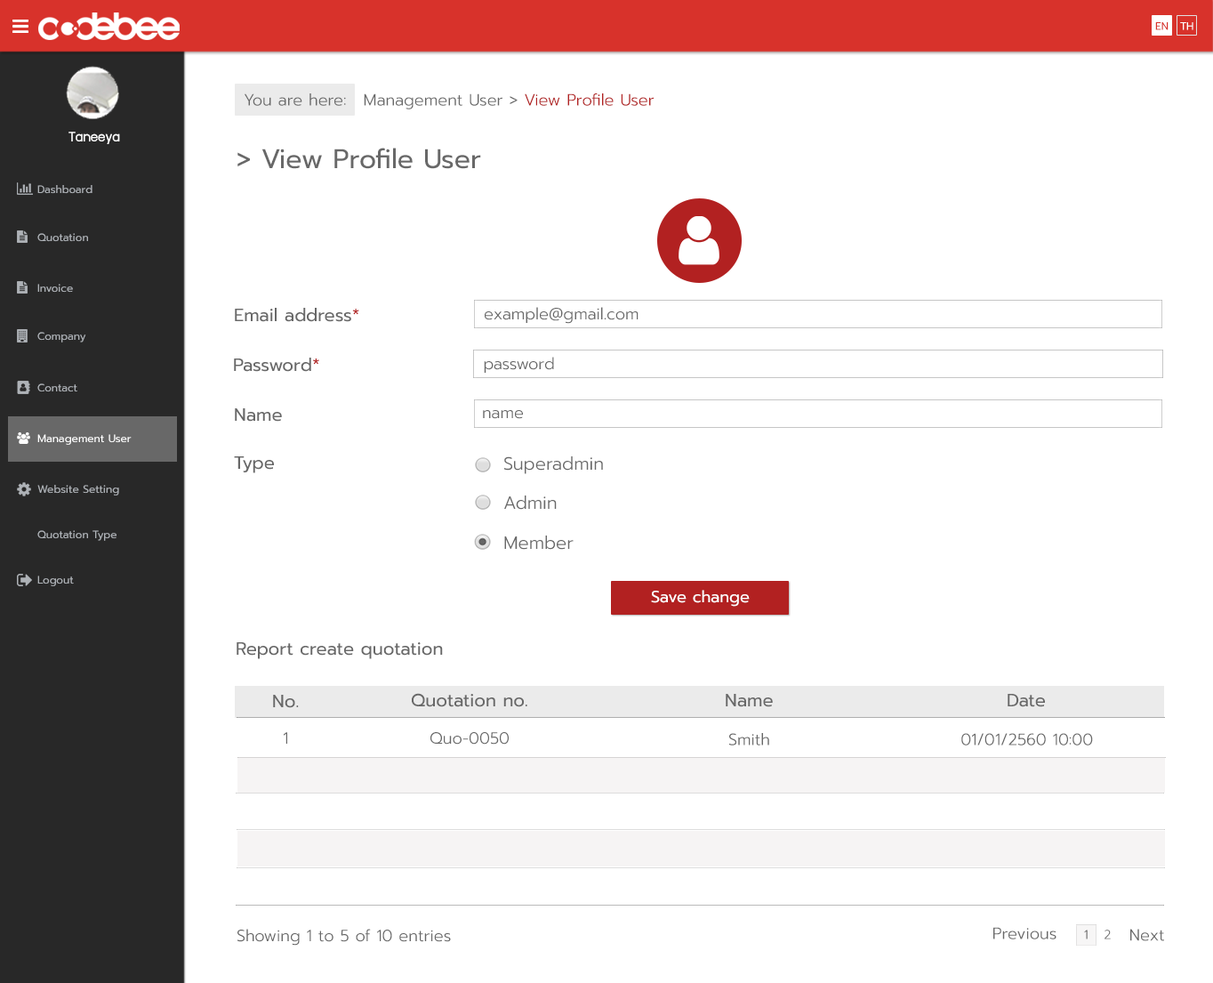
<style>
.page{position:relative;width:1213px;height:983px;background:#ffffff}
.page>*{position:absolute;margin:0}
.t1{font:10.7px "Prompt-Regular";color:#d8322b}
.t2{font:10.7px "Prompt-Regular";color:#ffffff}
.t3{font:16px "Prompt-Light";color:#686868}
.t4{font:16px "Prompt-Light";color:#b22121}
.t5{font:16px "supermarket";color:#ffffff}
.t6{font:26.7px "Prompt-Regular";color:#686868}
.t7{font:10.7px "Prompt-Regular";color:#aeb2b7}
.t8{font:17.8px "Prompt-Regular";color:#686868}
.t9{font:17.8px "Prompt-Regular";color:#b22121}
.t10{font:17.8px "Prompt-Light";color:#686868}
.t11{font:16px "Prompt-Regular";color:#ffffff}
.t12{font:12.5px "Prompt-Light";color:#686868}
</style>
<div class="page">
<p class="t1" style="left:1155px;top:22px;width:14px;height:8px">EN</p>
<p class="t2" style="left:1180px;top:22px;width:14px;height:8px">TH</p>
<p class="t3" style="left:245px;top:93px;width:101px;height:13px">You are here:</p>
<p class="t3" style="left:364px;top:93px;width:291px;height:16px">Management User &gt; <span class="t4">View Profile User</span></p>
<p class="t5" style="left:68px;top:132px;width:52px;height:12px">Taneeya</p>
<p class="t6" style="left:237px;top:148px;width:244px;height:21px">&gt; View Profile User</p>
<p class="t7" style="left:37px;top:185px;width:56px;height:9px">Dashboard</p>
<p class="t7" style="left:37px;top:233px;width:51px;height:9px">Quotation</p>
<p class="t7" style="left:37px;top:284px;width:36px;height:9px">Invoice</p>
<p class="t8" style="left:235px;top:308px;width:124px;height:14px">Email address<span class="t9">*</span></p>
<p class="t3" style="left:485px;top:307px;width:154px;height:17px">example@gmail.com</p>
<p class="t7" style="left:37px;top:332px;width:49px;height:10px">Company</p>
<p class="t8" style="left:234px;top:358px;width:85px;height:14px">Password<span class="t9">*</span></p>
<p class="t3" style="left:484px;top:357px;width:70px;height:16px">password</p>
<p class="t7" style="left:37px;top:383px;width:40px;height:9px">Contact</p>
<p class="t8" style="left:235px;top:408px;width:47px;height:14px">Name</p>
<p class="t3" style="left:483px;top:410px;width:40px;height:9px">name</p>
<p class="t2" style="left:37px;top:434px;width:95px;height:11px">Management User</p>
<p class="t8" style="left:234px;top:456px;width:40px;height:17px">Type</p>
<p class="t10" style="left:504px;top:456px;width:99px;height:18px">Superadmin</p>
<p class="t7" style="left:37px;top:485px;width:82px;height:10px">Website Setting</p>
<p class="t10" style="left:504px;top:495px;width:53px;height:15px">Admin</p>
<p class="t7" style="left:37px;top:530px;width:80px;height:11px">Quotation Type</p>
<p class="t10" style="left:504px;top:535px;width:70px;height:15px">Member</p>
<p class="t7" style="left:37px;top:575px;width:37px;height:11px">Logout</p>
<p class="t11" style="left:651px;top:590px;width:99px;height:17px">Save change</p>
<p class="t8" style="left:237px;top:642px;width:206px;height:17px">Report create quotation</p>
<p class="t8" style="left:273px;top:695px;width:26px;height:13px">No.</p>
<p class="t8" style="left:412px;top:693px;width:115px;height:14px">Quotation no.</p>
<p class="t8" style="left:726px;top:694px;width:47px;height:13px">Name</p>
<p class="t8" style="left:1008px;top:694px;width:37px;height:13px">Date</p>
<p class="t3" style="left:284px;top:732px;width:3px;height:12px">1</p>
<p class="t3" style="left:431px;top:732px;width:78px;height:12px">Quo-0050</p>
<p class="t3" style="left:729px;top:733px;width:40px;height:12px">Smith</p>
<p class="t3" style="left:962px;top:733px;width:131px;height:12px">01/01/2560 10:00</p>
<p class="t3" style="left:237px;top:929px;width:214px;height:17px">Showing 1 to 5 of 10 entries</p>
<p class="t3" style="left:994px;top:927px;width:63px;height:12px">Previous</p>
<p class="t12" style="left:1084px;top:929px;width:4px;height:10px">1</p>
<p class="t12" style="left:1105px;top:929px;width:6px;height:10px">2</p>
<p class="t3" style="left:1131px;top:929px;width:33px;height:12px">Next</p>
</div>
